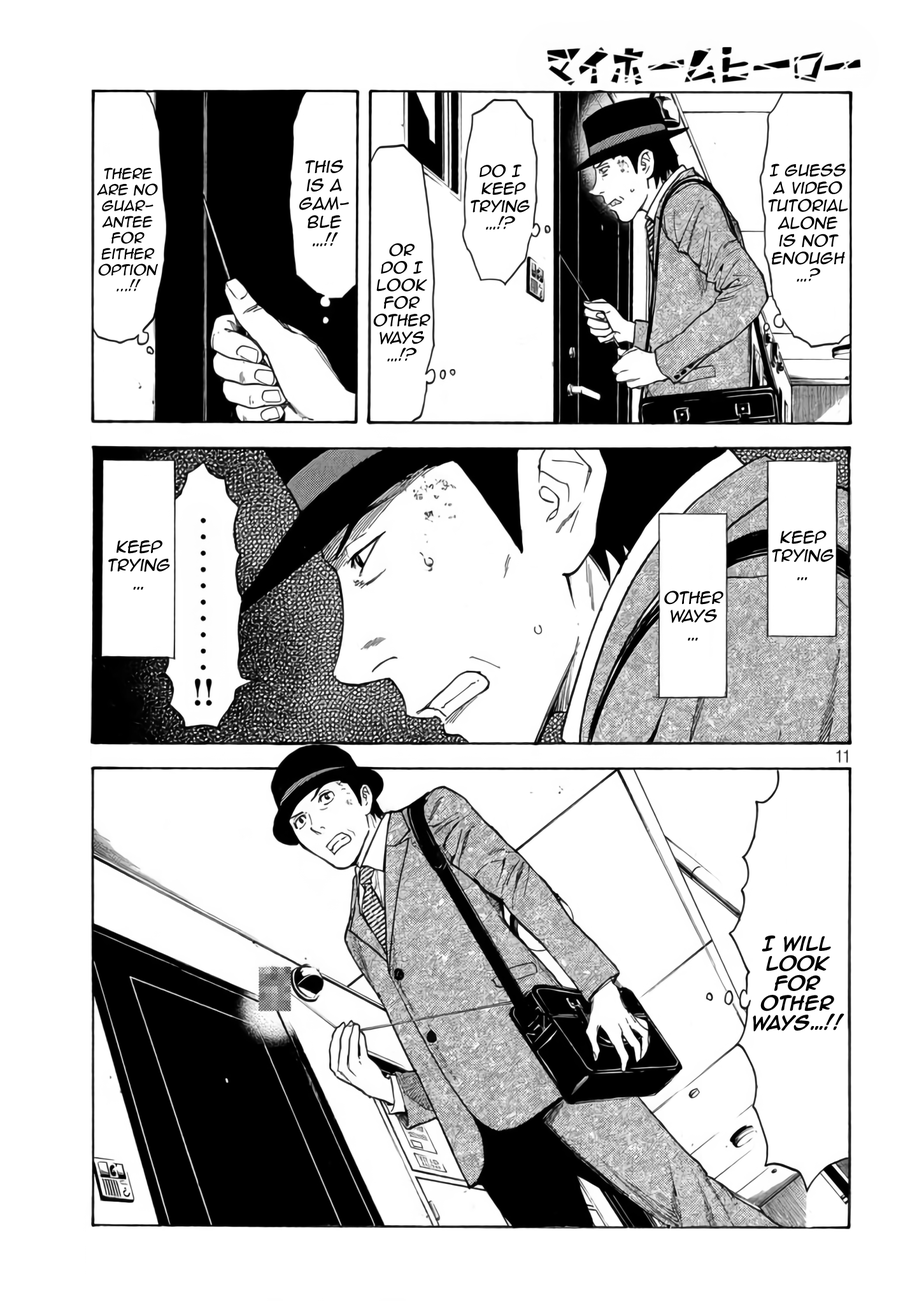
<style>
.page{position:relative;width:917px;height:1301px;background:#ffffff}
.page>*{position:absolute;margin:0}
.t1{font:15.3px "AnimeAce2.0BB";color:#000000;font-style:italic}
.t2{font:13.4px "AnimeAce2.0BB";color:#000000;font-style:italic}
.t3{font:14.6px "AnimeAce2.0BB";color:#000000;font-style:italic}
.t4{font:16.5px "AnimeAce2.0BB-Bold";color:#000000}
</style>
<div class="page">
<p class="t1" style="left:299px;top:160px;width:50px;height:86px;text-align:center">This <br>is a gam-<br>ble<br>…!!</p>
<p class="t2" style="left:97px;top:167px;width:61px;height:125px;text-align:center">There are no guarantee for either option<br>...!!</p>
<p class="t3" style="left:470px;top:164px;width:60px;height:66px;text-align:center">Do I<br> keep trying<br>…!?</p>
<p class="t3" style="left:768px;top:164px;width:80px;height:118px;text-align:center">I guess a video tutorial alone <br>is not enough…?</p>
<p class="t3" style="left:373px;top:243px;width:57px;height:119px;text-align:center">Or <br>do I <br>look for other ways<br>…!?</p>
<p class="t1" style="left:771px;top:530px;width:62px;height:50px;text-align:center">keep trying<br>…</p>
<p class="t1" style="left:108px;top:540px;width:62px;height:50px;text-align:center">keep trying<br>…</p>
<p class="t1" style="left:664px;top:591px;width:59px;height:50px;text-align:center">Other ways…</p>
<p class="t4" style="left:752px;top:935px;width:92px;height:97px;text-align:center">I will look for  other ways…!!</p>
</div>
